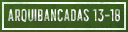
<style>
.page{position:relative;width:128px;height:32px}
.page>*{position:absolute;margin:0}
.t1{font:12px "HillstownCondensedClean";letter-spacing:0.05em;text-transform:uppercase}
</style>
<div class="page">
<p class="t1" style="left:8px;top:9px;width:112px;height:13px">arquibancadas 13-18</p>
</div>
